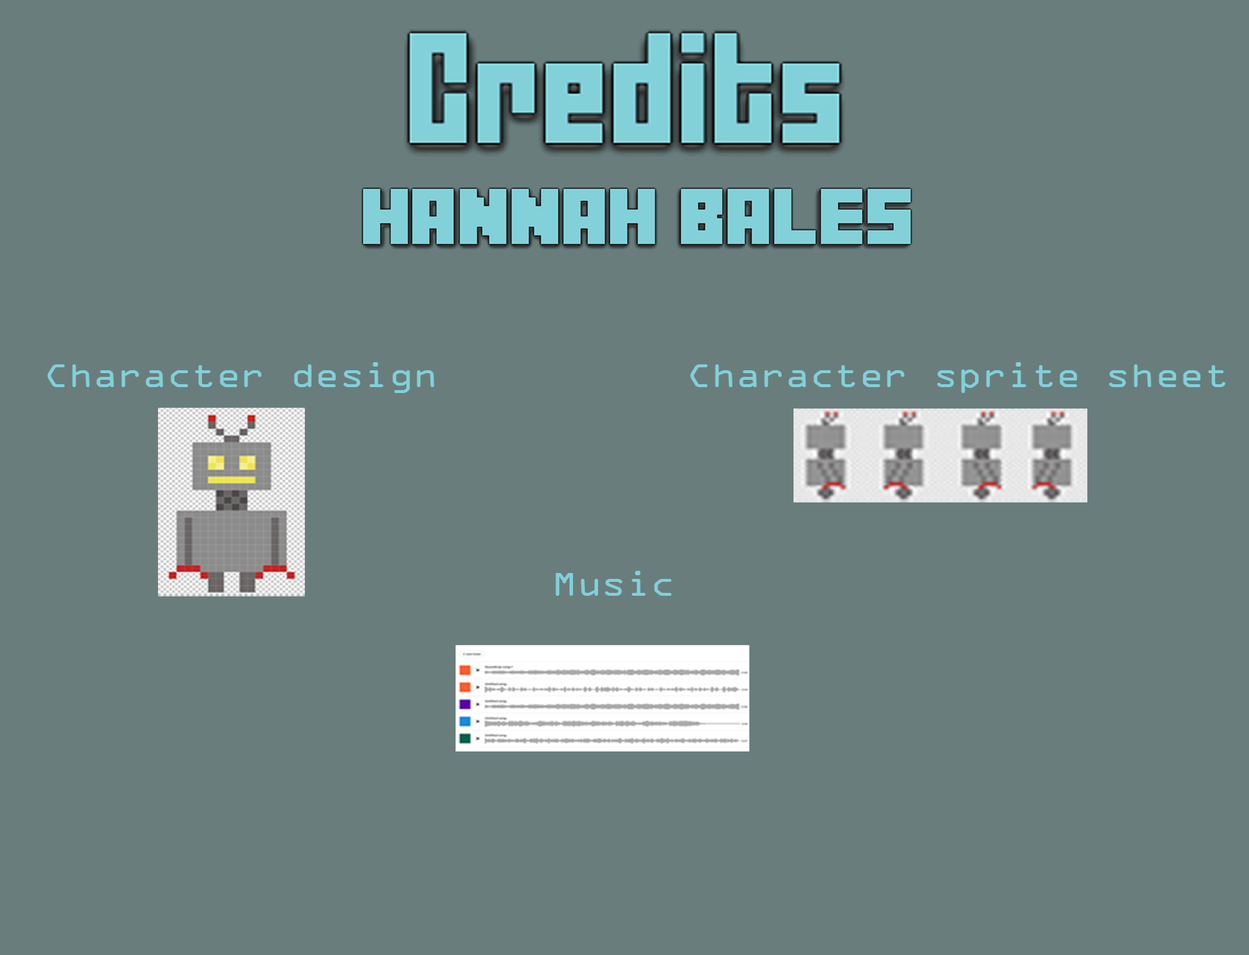
<style>
.page{position:relative;width:1249px;height:955px;background:#697d7d}
.page>*{position:absolute;margin:0}
.t1{font:35.4px "OCRAExtended";color:#82d0d8;scale:1.15 1}
</style>
<div class="page">
<p class="t1" style="left:47px;top:362px;width:387px;height:31px">Character design</p>
<p class="t1" style="left:690px;top:362px;width:535px;height:31px">Character sprite sheet</p>
<p class="t1" style="left:555px;top:571px;width:116px;height:25px">Music</p>
</div>
